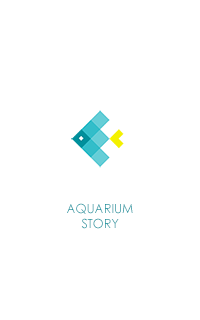
<style>
.page{position:relative;width:200px;height:320px;background:#ffffff}
.page>*{position:absolute;margin:0}
.t1{font:12.5px "CenturyGothic";letter-spacing:-0.005em}
</style>
<div class="page">
<p class="t1" style="left:67px;top:203px;width:66px;height:26px;text-align:center">AQUARIUM<br>STORY</p>
</div>
